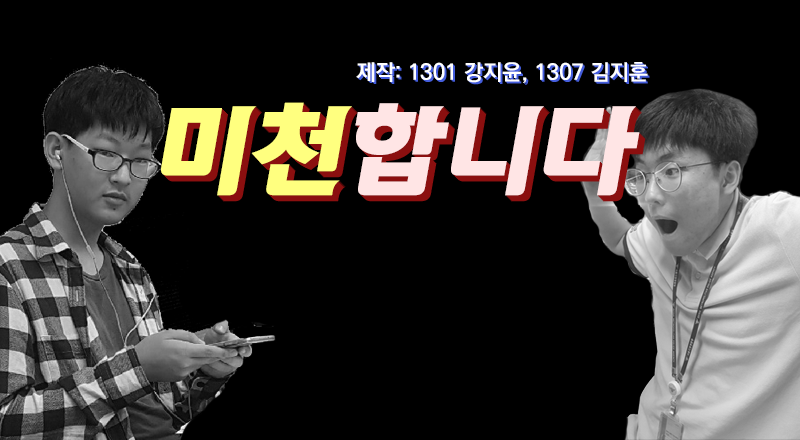
<style>
.page{position:relative;width:800px;height:440px;background:#000000}
.page>*{position:absolute;margin:0}
.t1{font:22px "KoPubDotumBold";color:#ffffff}
.t2{font:100px "KoreanSPD-R";color:#ffe5e5}
.t3{font:100px "KoreanSPD-R";color:#ffff7f}
</style>
<div class="page">
<p class="t1" style="left:356px;top:62px;width:292px;height:21px">제작: 1301 강지윤, 1307 김지훈</p>
<p class="t2" style="left:161px;top:102px;width:479px;height:94px"><span class="t3">미천</span>합니다</p>
</div>
